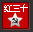
<style>
.page{position:relative;width:33px;height:32px;background:#c50000}
.page>*{position:absolute;margin:0}
.t1{font:10.4px "SimSun";letter-spacing:-0.25em;color:#ffffff}
</style>
<div class="page">
<p class="t1" style="left:4px;top:4px;width:24px;height:8px">红三十</p>
</div>
